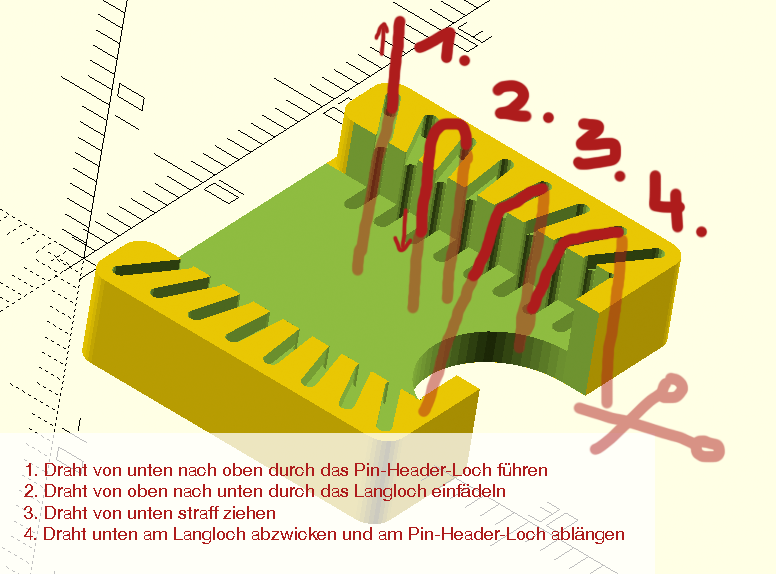
<style>
.page{position:relative;width:776px;height:574px;background:#ffffe5}
.page>*{position:absolute;margin:0}
.t1{font:18px "HelveticaNeue";color:#ae1c1c}
</style>
<div class="page">
<p class="t1" style="left:24px;top:463px;width:600px;height:81px">1. Draht von unten nach oben durch das Pin-Header-Loch führen<br>2. Draht von oben nach unten durch das Langloch einfädeln<br>3. Draht von unten straff ziehen<br>4. Draht unten am Langloch abzwicken und am Pin-Header-Loch ablängen</p>
</div>
